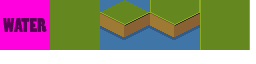
<style>
.page{position:relative;width:256px;height:64px;background:#658720}
.page>*{position:absolute;margin:0}
.t1{font:18px "PoplarStd";color:#570254}
</style>
<div class="page">
<p class="t1" style="left:3px;top:18px;width:44px;height:14px">WATER</p>
</div>
